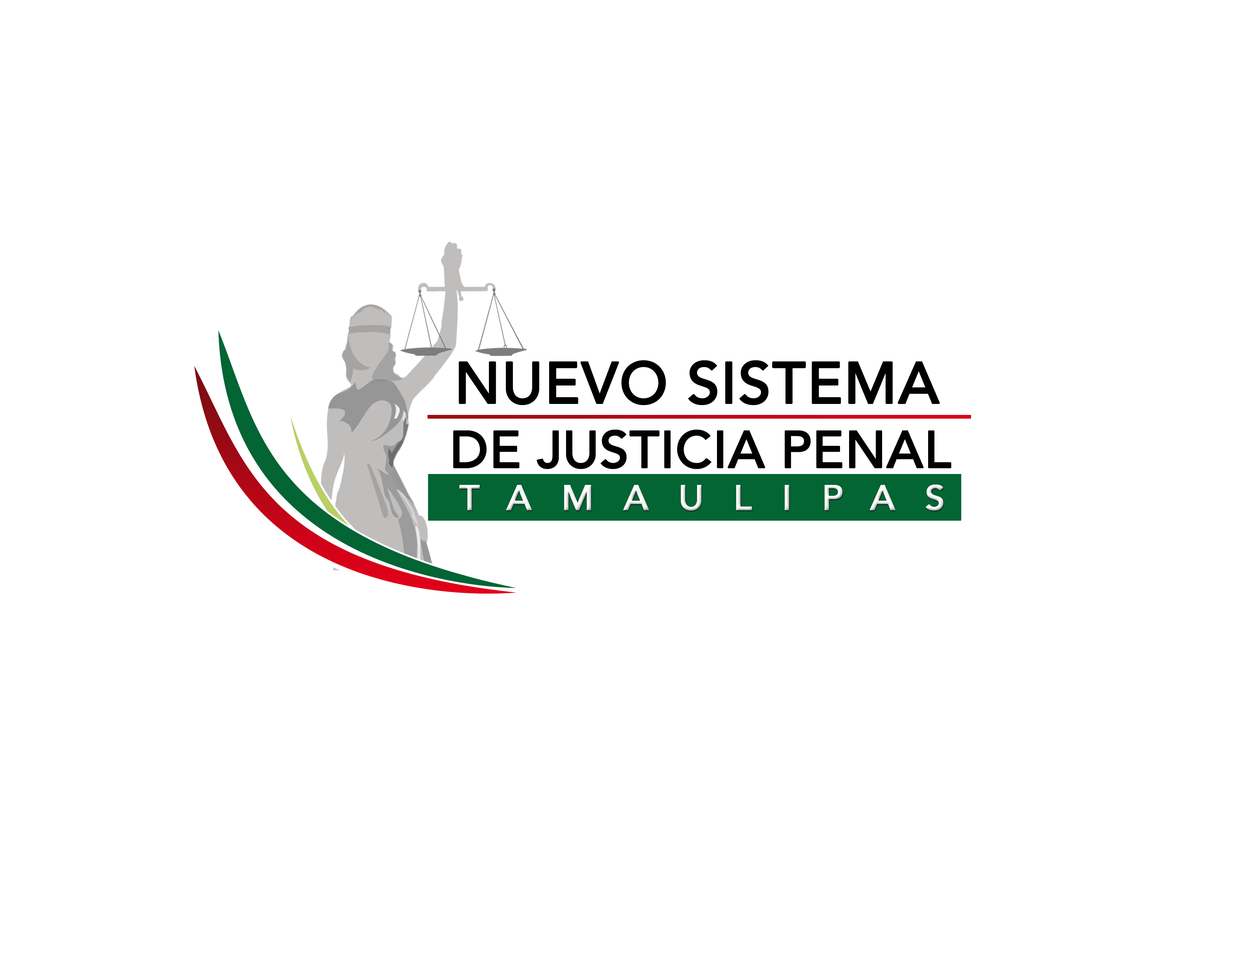
<style>
.page{position:relative;width:1242px;height:960px;background:#ffffff}
.page>*{position:absolute;margin:0}
.t1{font:58px "AvenirLTStd-Medium";color:#000000;text-transform:uppercase;font-weight:bold}
.t2{font:51.8px "AvenirLTStd-Medium";letter-spacing:-0.01em;color:#010101;text-transform:uppercase;font-weight:bold}
.t3{font:35.2px "AvenirLTStd-Medium";letter-spacing:0.83em;color:#ffffff;text-transform:uppercase;font-weight:bold}
</style>
<div class="page">
<p class="t1" style="left:459px;top:360px;width:481px;height:45px">Nuevo Sistema</p>
<p class="t2" style="left:453px;top:430px;width:499px;height:39px">DE JUSTICIA PENAL</p>
<p class="t3" style="left:459px;top:484px;width:485px;height:27px">TAMAULIPAS</p>
</div>
